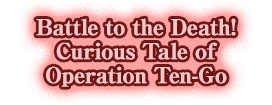
<style>
.page{position:relative;width:272px;height:105px;background:#ffffff}
.page>*{position:absolute;margin:0}
.t1{font:22px/24px "RyuminPro-ExBold";letter-spacing:-0.04em;color:#ffc4c4;font-weight:bold}
</style>
<div class="page">
<p class="t1" style="left:36px;top:18px;width:200px;height:69px;text-align:center">Battle to the Death!<br>Curious Tale of<br>Operation Ten-Go</p>
</div>
